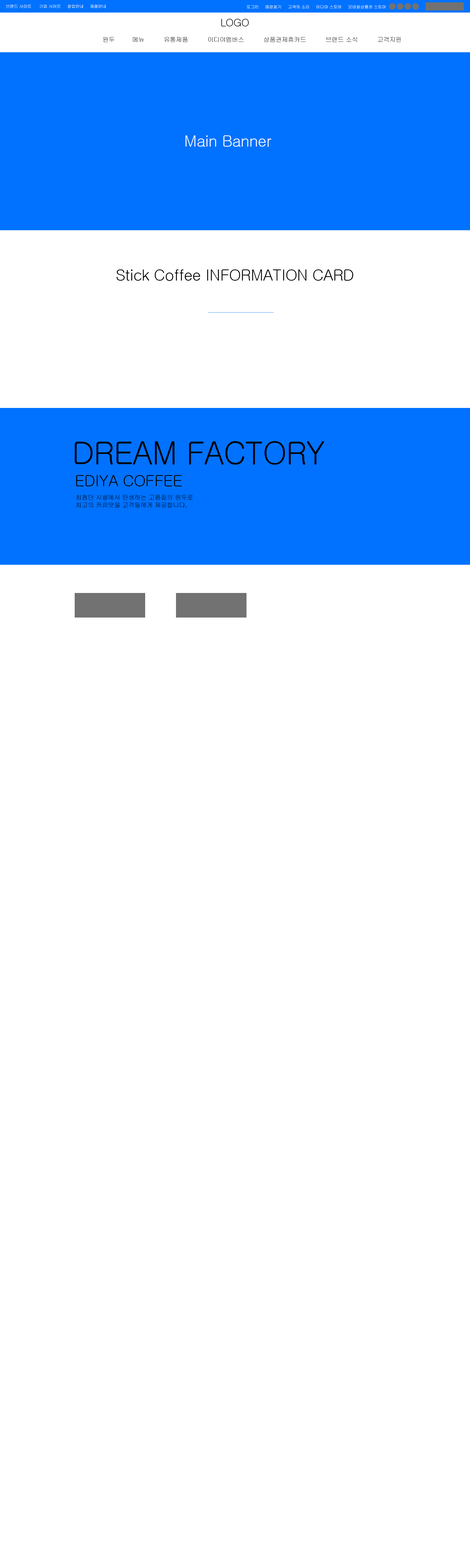
<style>
.page{position:relative;width:470px;height:1568px;background:#ffffff}
.page>*{position:absolute;margin:0}
.t1{font:4.2px "Gulim";letter-spacing:-0.025em;color:#ffffff}
.t2{font:10.5px "Gulim";letter-spacing:-0.025em;color:#000000}
.t3{font:6.3px "Gulim";letter-spacing:-0.025em;color:#000000}
.t4{font:15.7px "Gulim";letter-spacing:-0.025em;color:#ffffff}
.t5{font:15.7px "Gulim";letter-spacing:-0.025em;color:#000000}
.t6{font:31.4px "Gulim";letter-spacing:-0.025em;color:#000000}
</style>
<div class="page">
<p class="t1" style="left:6px;top:4px;width:100px;height:4px">브랜드 사이트      기업 사이트     창업안내     채용안내</p>
<p class="t1" style="left:247px;top:5px;width:139px;height:4px">로그인     매장찾기     고객의 소리     이디야 스토어     모바일상품권 스토어</p>
<p class="t2" style="left:221px;top:19px;width:28px;height:7px">LOGO</p>
<p class="t3" style="left:103px;top:37px;width:298px;height:5px">원두         메뉴          유통제품          이디야멤버스          상품권제휴카드          브랜드 소식          고객지원</p>
<p class="t4" style="left:186px;top:135px;width:86px;height:12px">Main Banner</p>
<p class="t5" style="left:117px;top:269px;width:237px;height:12px">Stick Coffee INFORMATION CARD</p>
<p class="t6" style="left:75px;top:441px;width:249px;height:24px">DREAM FACTORY</p>
<p class="t5" style="left:76px;top:475px;width:106px;height:11px">EDIYA COFFEE</p>
<p class="t3" style="left:76px;top:495px;width:117px;height:13px">최첨단 시설에서 탄생하는 고품질의 원두로<br>최고의 커피맛을 고객들에게 제공합니다.</p>
</div>
